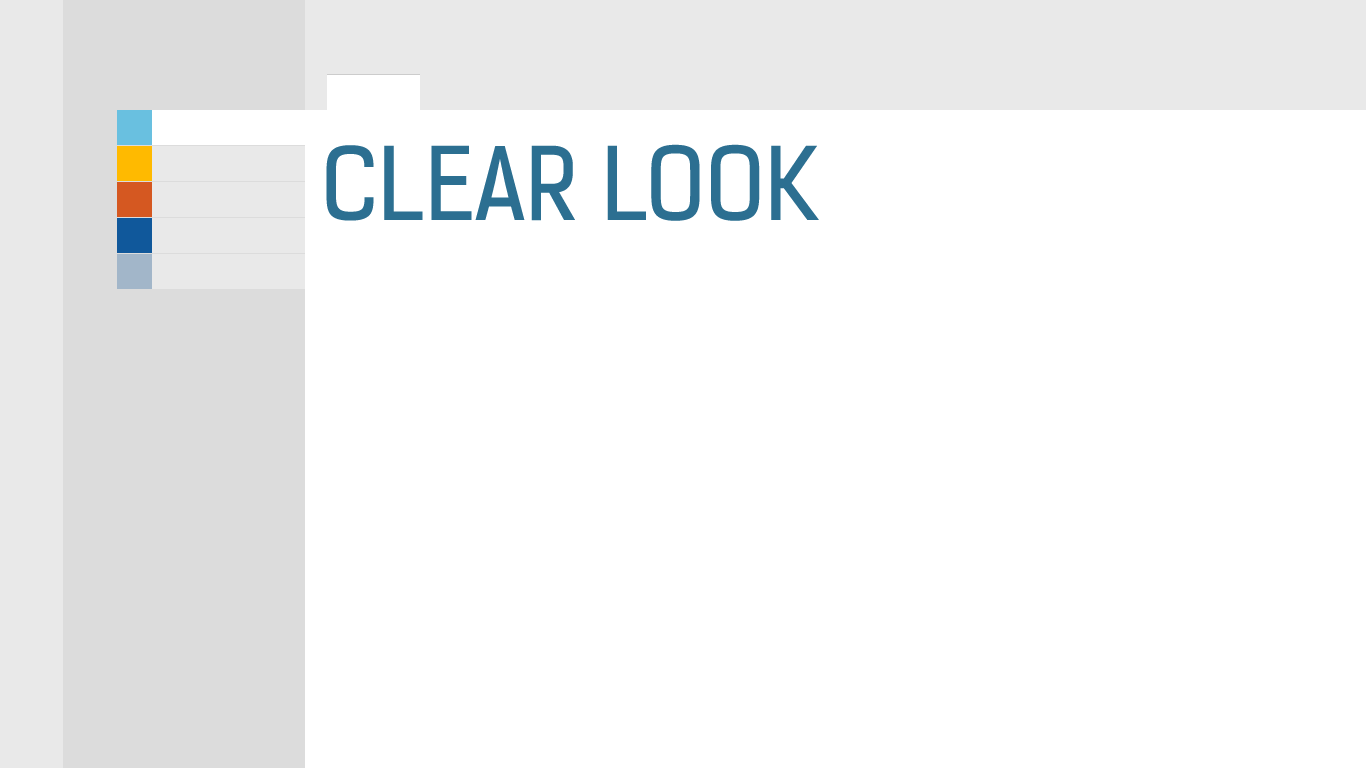
<style>
.page{position:relative;width:1366px;height:768px;background:#ffffff}
.page>*{position:absolute;margin:0}
.t1{font:96px "KelsonSans-Regular";color:#2c6f91;text-transform:uppercase}
</style>
<div class="page">
<p class="t1" style="left:326px;top:144px;width:493px;height:77px">clear look</p>
</div>
